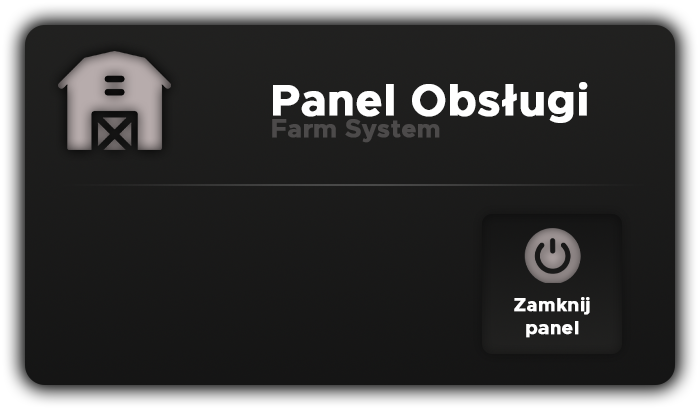
<style>
.page{position:relative;width:700px;height:410px}
.page>*{position:absolute;margin:0}
.t1{font:44.3px "Metropolis-Bold";color:#ffffff;font-weight:bold}
.t2{font:25.1px "Metropolis-Bold";color:#4c4a4a;font-weight:bold}
.t3{font:19px "Metropolis-Bold";color:#ffffff;font-weight:bold}
</style>
<div class="page">
<p class="t1" style="left:273px;top:82px;width:315px;height:41px">Panel Obsługi</p>
<p class="t2" style="left:272px;top:119px;width:168px;height:24px">Farm System</p>
<p class="t3" style="left:514px;top:297px;width:76px;height:41px;text-align:center">Zamknij<br>panel</p>
</div>
